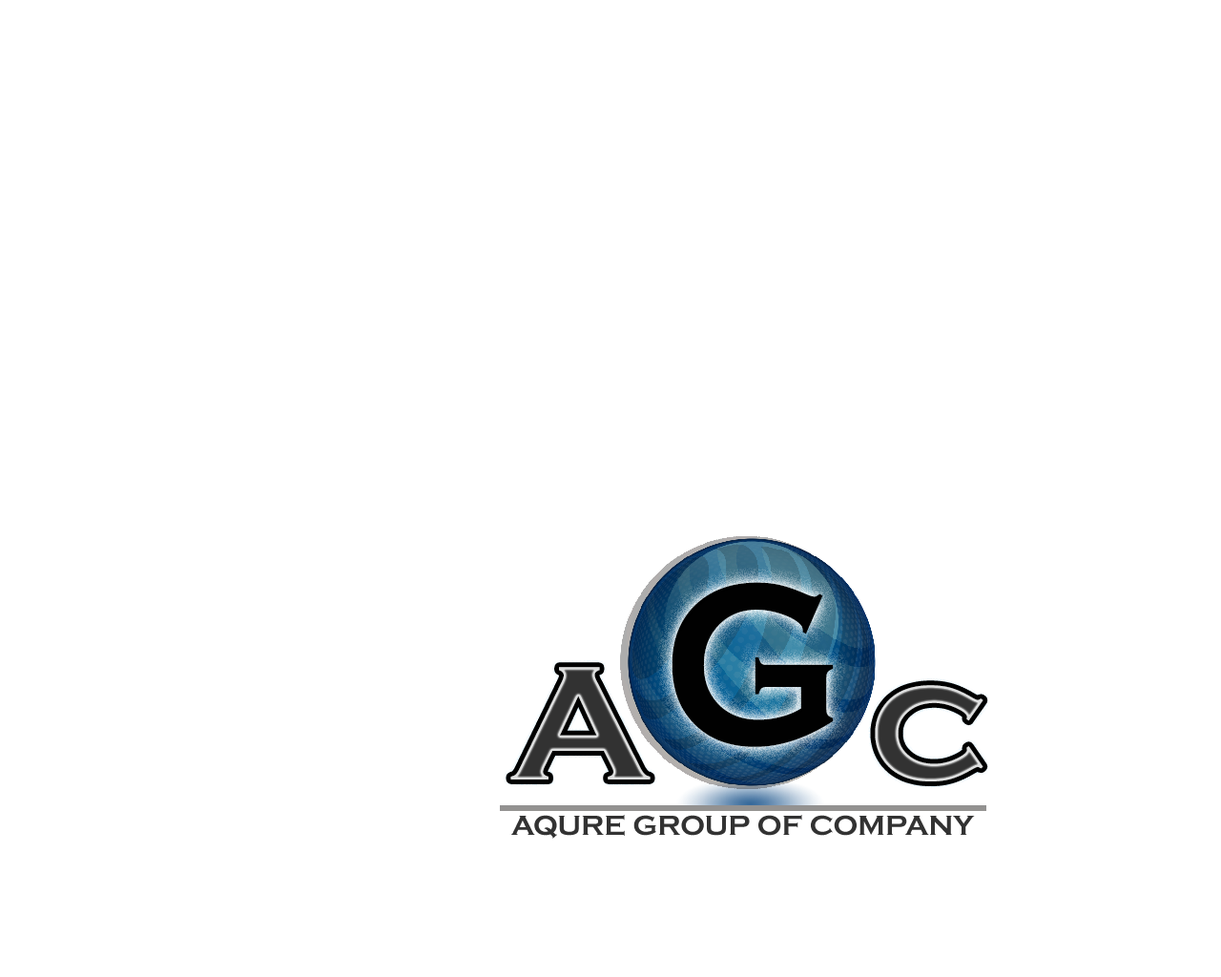
<style>
.page{position:relative;width:1221px;height:977px;background:#ffffff}
.page>*{position:absolute;margin:0}
.t1{font:237.7px "CopperplateGothic-Bold";color:#010101;scale:0.89 1}
.t2{font:168.1px "CopperplateGothic-Bold";color:#323232}
.t3{font:28.6px "CopperplateGothic-Bold";color:#323232}
</style>
<div class="page">
<p class="t1" style="left:671px;top:582px;width:163px;height:165px">G</p>
<p class="t2" style="left:510px;top:667px;width:140px;height:112px">A</p>
<p class="t2" style="left:875px;top:685px;width:108px;height:96px">c</p>
<p class="t3" style="left:511px;top:815px;width:464px;height:23px">AQURE GROUP OF COMPANY</p>
</div>
